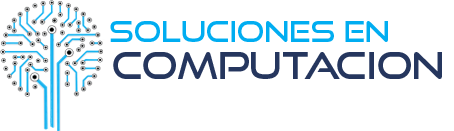
<style>
.page{position:relative;width:454px;height:131px;background:#ffffff}
.page>*{position:absolute;margin:0}
.t1{font:28.2px "GoodTimesRg-Regular";color:#00adf1}
.t2{font:36.8px "GoodTimesRg-Regular";color:#25365e}
</style>
<div class="page">
<p class="t1" style="left:110px;top:21px;width:278px;height:21px">SOluciones en</p>
<p class="t2" style="left:113px;top:52px;width:329px;height:27px">Computacion</p>
</div>
